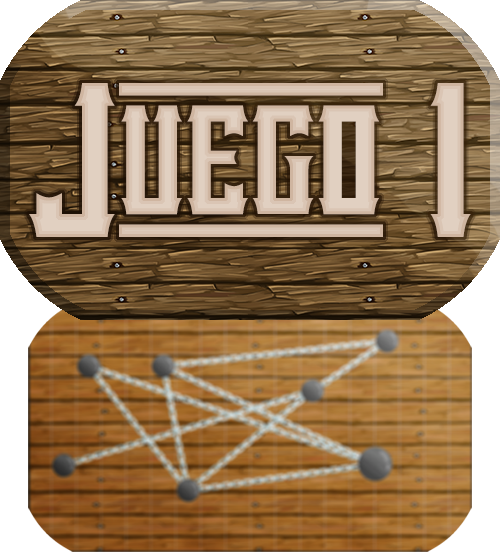
<style>
.page{position:relative;width:500px;height:552px}
.page>*{position:absolute;margin:0}
.t1{font:190px "VanillaWhale-Regular";color:#e1d0c1}
</style>
<div class="page">
<p class="t1" style="left:29px;top:83px;width:442px;height:154px">Juego 1</p>
</div>
